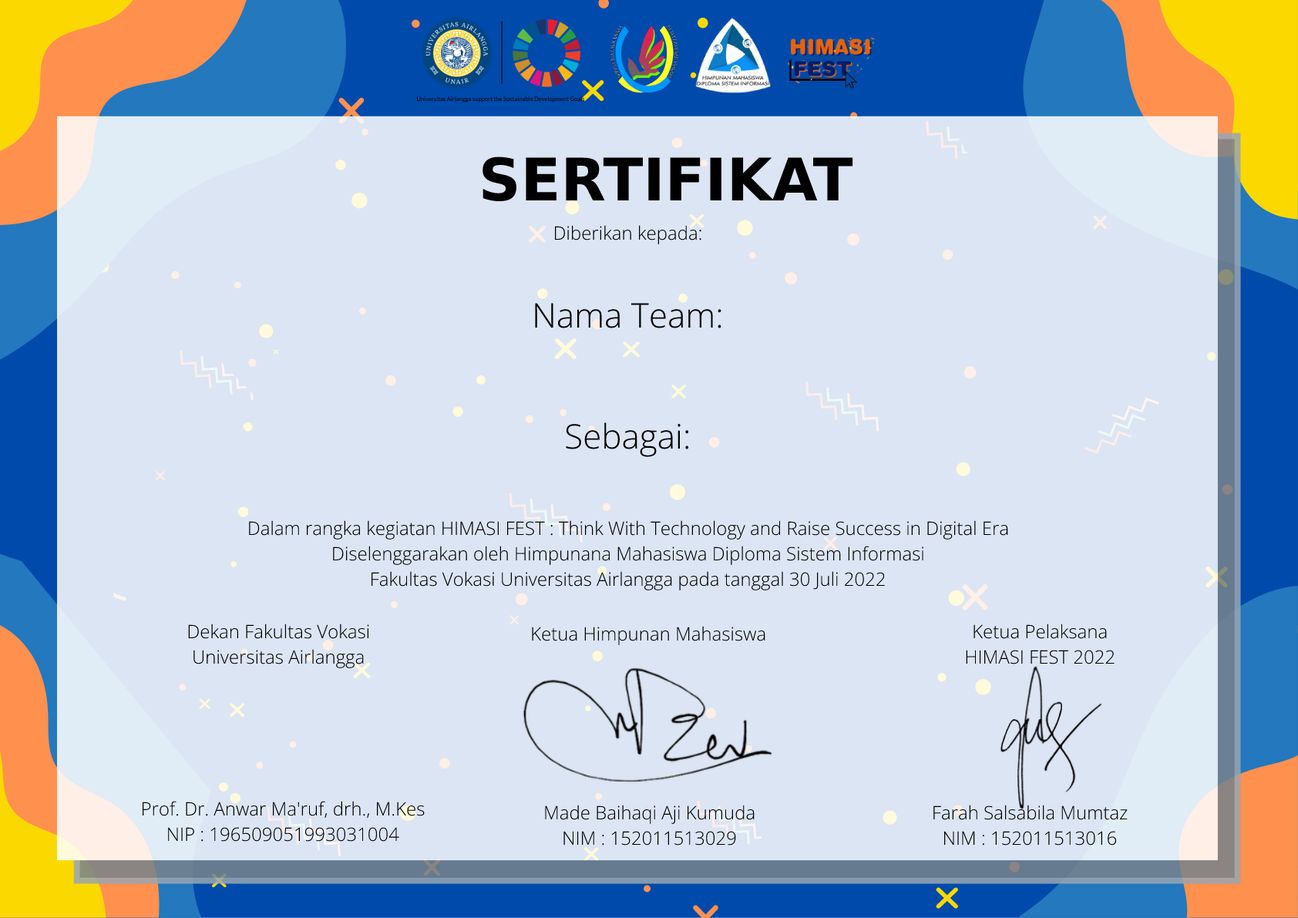
<style>
.page{position:relative;width:1298px;height:918px;background:#dbe5f3}
.page>*{position:absolute;margin:0}
.t1{font:58.6px "Lovelo-Black";color:#000000}
.t2{font:18.5px "OpenSans-Light";color:#000000}
.t3{font:33.9px "OpenSans-Light";color:#000000}
</style>
<div class="page">
<p class="t1" style="left:483px;top:157px;width:371px;height:45px">SERTIFIKAT</p>
<p class="t2" style="left:554px;top:225px;width:148px;height:19px">Diberikan kepada:</p>
<p class="t3" style="left:535px;top:303px;width:187px;height:25px">Nama Team:</p>
<p class="t3" style="left:566px;top:423px;width:123px;height:34px">Sebagai:</p>
<p class="t2" style="left:249px;top:520px;width:760px;height:20px">Dalam rangka kegiatan HIMASI FEST : Think With Technology and Raise Success in Digital Era</p>
<p class="t2" style="left:333px;top:546px;width:591px;height:19px">Diselenggarakan oleh Himpunana Mahasiswa Diploma Sistem Informasi</p>
<p class="t2" style="left:372px;top:571px;width:513px;height:20px">Fakultas Vokasi Universitas Airlangga pada tanggal 30 Juli 2022</p>
<p class="t2" style="left:188px;top:624px;width:181px;height:15px">Dekan Fakultas Vokasi</p>
<p class="t2" style="left:532px;top:626px;width:234px;height:19px">Ketua Himpunan Mahasiswa</p>
<p class="t2" style="left:974px;top:624px;width:133px;height:15px">Ketua Pelaksana</p>
<p class="t2" style="left:194px;top:649px;width:170px;height:20px">Universitas Airlangga</p>
<p class="t2" style="left:966px;top:650px;width:149px;height:15px">HIMASI FEST 2022</p>
<p class="t2" style="left:142px;top:801px;width:283px;height:18px">Prof. Dr. Anwar Ma'ruf, drh., M.Kes</p>
<p class="t2" style="left:545px;top:805px;width:210px;height:19px">Made Baihaqi Aji Kumuda</p>
<p class="t2" style="left:934px;top:805px;width:194px;height:15px">Farah Salsabila Mumtaz</p>
<p class="t2" style="left:168px;top:827px;width:231px;height:15px">NIP : 196509051993031004</p>
<p class="t2" style="left:564px;top:831px;width:172px;height:15px">NIM : 152011513029</p>
<p class="t2" style="left:945px;top:831px;width:172px;height:15px">NIM : 152011513016</p>
</div>
